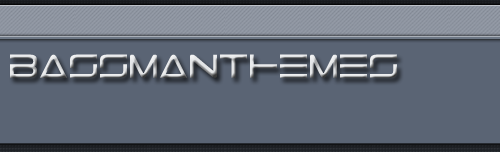
<style>
.page{position:relative;width:500px;height:152px;background:#5a6474}
.page>*{position:absolute;margin:0}
.t1{font:30px "Tele-Marines"}
</style>
<div class="page">
<p class="t1" style="left:10px;top:54px;width:387px;height:24px">BASSMANTHEMES</p>
</div>
